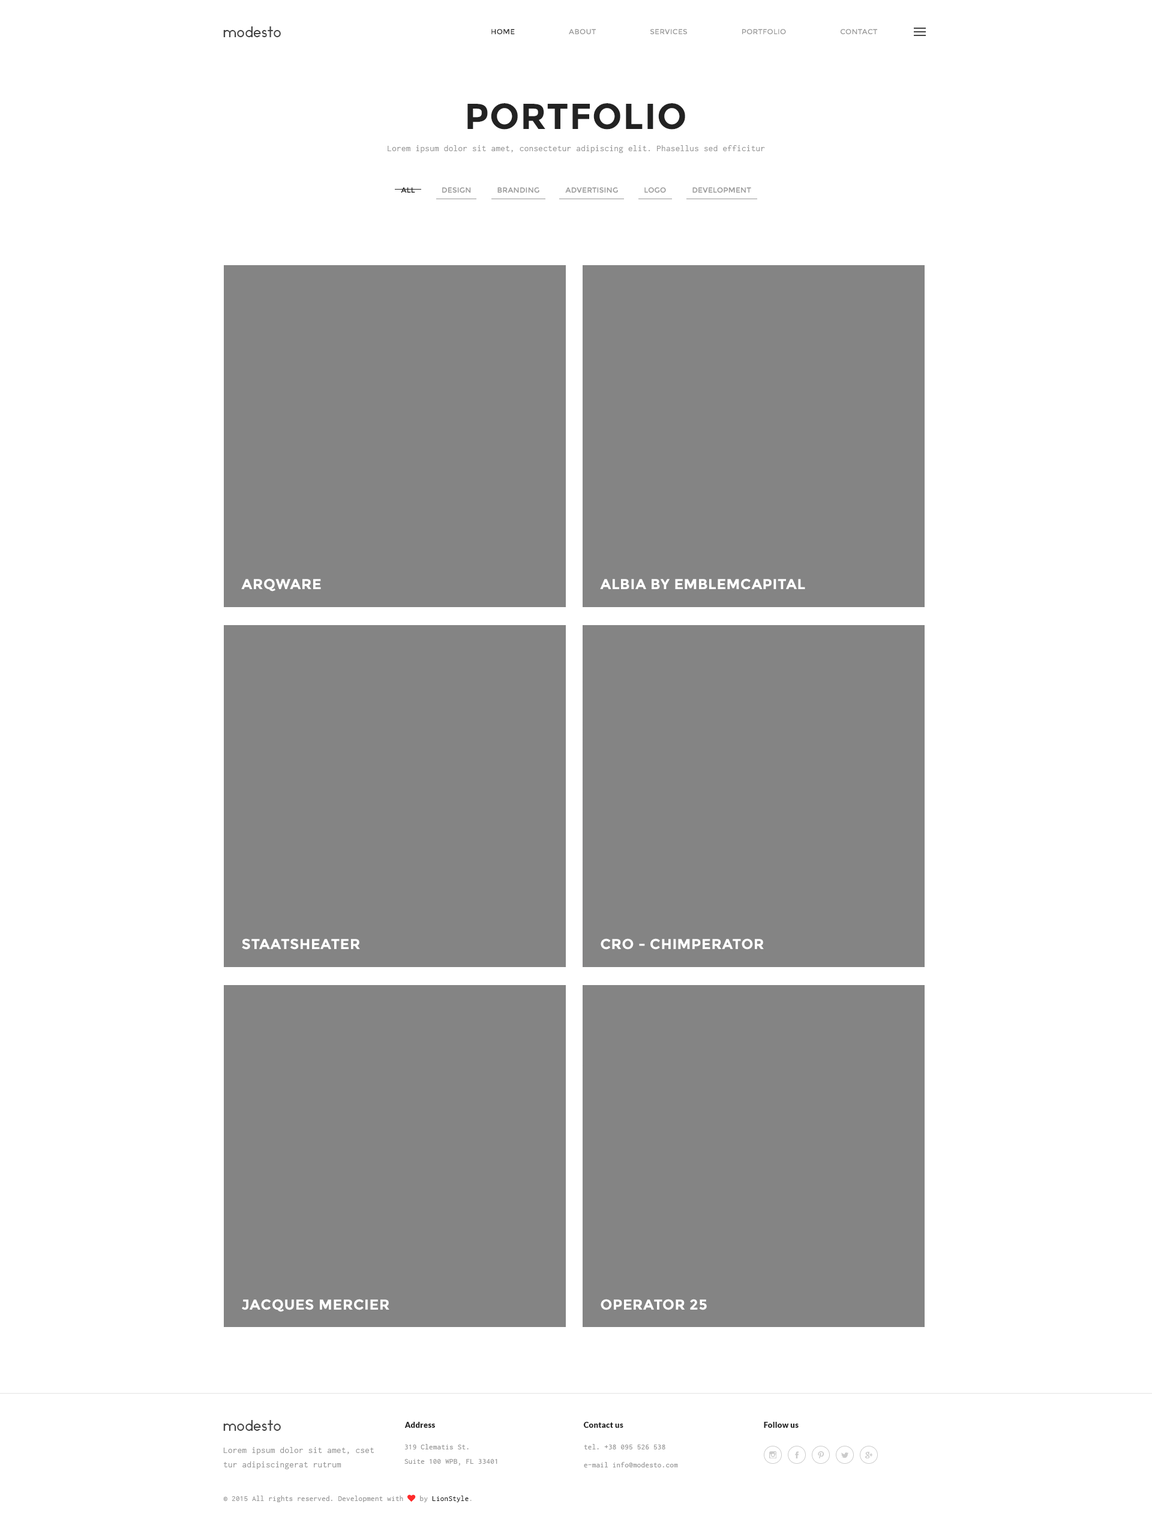
<style>
.page{position:relative;width:1152px;height:1531px;background:#ffffff}
.page>*{position:absolute;margin:0}
.t1{font:14.4px "Ikaros";letter-spacing:0.025em;color:#444444}
.t2{font:7.2px "Montserrat-Regular";letter-spacing:0.025em;color:#989898;text-transform:uppercase}
.t3{font:7.2px "Montserrat-Regular";letter-spacing:0.025em;color:#222222;text-transform:uppercase}
.t4{font:36px "Montserrat-Bold";letter-spacing:0.025em;color:#222222;text-transform:uppercase}
.t5{font:9px "Inconsolata";letter-spacing:0.025em;color:#989898}
.t6{font:14.4px "Montserrat-Bold";letter-spacing:0.025em;color:#ffffff;text-transform:uppercase}
.t7{font:7.8px "Lato-Black";letter-spacing:0.025em;color:#222222}
.t8{font:7.8px/14.4px "Inconsolata";letter-spacing:0.025em;color:#989898}
.t9{font:7.8px/18px "Inconsolata";letter-spacing:0.025em;color:#989898}
.t10{font:9px/14.4px "Inconsolata";letter-spacing:0.025em;color:#989898}
.t11{font:7.8px "Inconsolata";letter-spacing:0.025em;color:#989898}
.t12{font:7.8px "FontAwesome";letter-spacing:0.025em;color:#fe2b2b}
.t13{font:7.8px "Inconsolata";letter-spacing:0.025em;color:#222222}
.t14{font:7.8px "Inconsolata";letter-spacing:0.025em;color:#b5b5b5}
</style>
<div class="page">
<p class="t1" style="left:223px;top:26px;width:58px;height:11px">modesto</p>
<p class="t2" style="left:491px;top:29px;width:386px;height:5px"><span class="t3">home                         </span>about                         services                         portfolio                         contact</p>
<p class="t4" style="left:467px;top:103px;width:218px;height:27px">portfolio</p>
<p class="t5" style="left:388px;top:145px;width:377px;height:8px">Lorem ipsum dolor sit amet, consectetur adipiscing elit. Phasellus sed efficitur</p>
<p class="t3" style="left:401px;top:187px;width:14px;height:6px">all</p>
<p class="t2" style="left:442px;top:187px;width:309px;height:6px">design            branding            advertising            logo            development</p>
<p class="t6" style="left:241px;top:578px;width:80px;height:14px">ARQWARE</p>
<p class="t6" style="left:600px;top:578px;width:205px;height:12px">albia by emblemcapital</p>
<p class="t6" style="left:242px;top:938px;width:118px;height:12px">staatsheater</p>
<p class="t6" style="left:601px;top:938px;width:163px;height:12px">Cro - Chimperator</p>
<p class="t6" style="left:242px;top:1299px;width:147px;height:13px">jacques mercier</p>
<p class="t6" style="left:601px;top:1299px;width:106px;height:11px">operator 25</p>
<p class="t1" style="left:223px;top:1420px;width:58px;height:11px">modesto</p>
<p class="t7" style="left:404px;top:1422px;width:31px;height:6px">Address</p>
<p class="t7" style="left:583px;top:1422px;width:40px;height:6px">Contact us</p>
<p class="t7" style="left:764px;top:1422px;width:35px;height:6px">Follow us</p>
<p class="t8" style="left:404px;top:1444px;width:93px;height:22px">319 Clematis St.<br>Suite 100 WPB, FL 33401</p>
<p class="t9" style="left:584px;top:1444px;width:94px;height:24px">tel. +38 095 526 538<br>e-mail info@modesto.com</p>
<p class="t10" style="left:223px;top:1447px;width:151px;height:22px">Lorem ipsum dolor sit amet, cset tur adipiscingerat rutrum</p>
<p class="t11" style="left:223px;top:1495px;width:249px;height:7px">© 2015 All rights reserved. Development with <span class="t12">♥ </span>by<span class="t13"> LionStyle</span><span class="t14">.</span></p>
</div>
